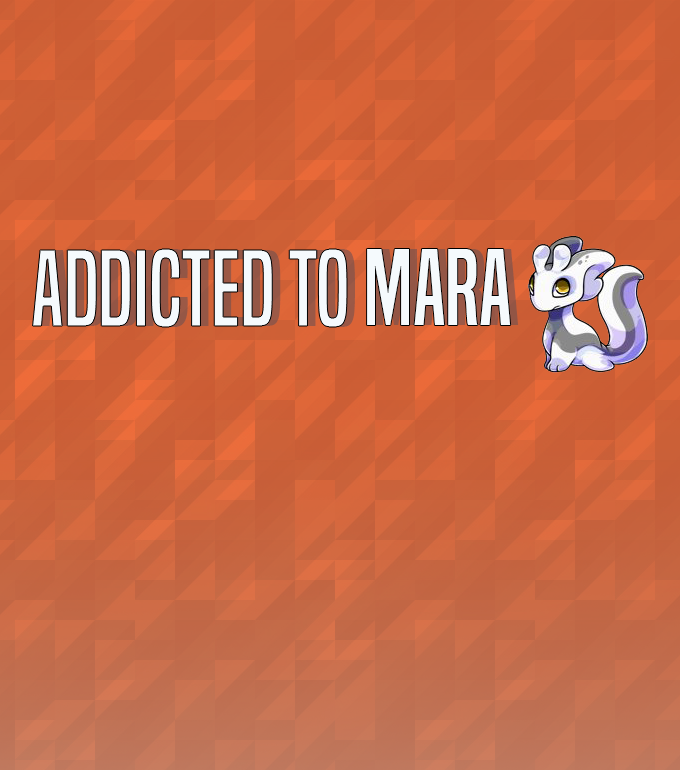
<style>
.page{position:relative;width:680px;height:770px}
.page>*{position:absolute;margin:0}
.t1{font:100px "BuiltTitlingRg-Regular";color:#f5fafd}
.t2{font:100px "BuiltTitlingRg-Regular"}
</style>
<div class="page">
<p class="t1" style="left:32px;top:249px;width:241px;height:78px">Addicted</p>
<p class="t2" style="left:40px;top:249px;width:241px;height:78px">Addicted</p>
<p class="t1" style="left:289px;top:249px;width:58px;height:78px">To</p>
<p class="t2" style="left:297px;top:249px;width:58px;height:78px">To</p>
<p class="t1" style="left:367px;top:249px;width:144px;height:76px">Mara</p>
<p class="t2" style="left:375px;top:249px;width:144px;height:76px">Mara</p>
</div>
